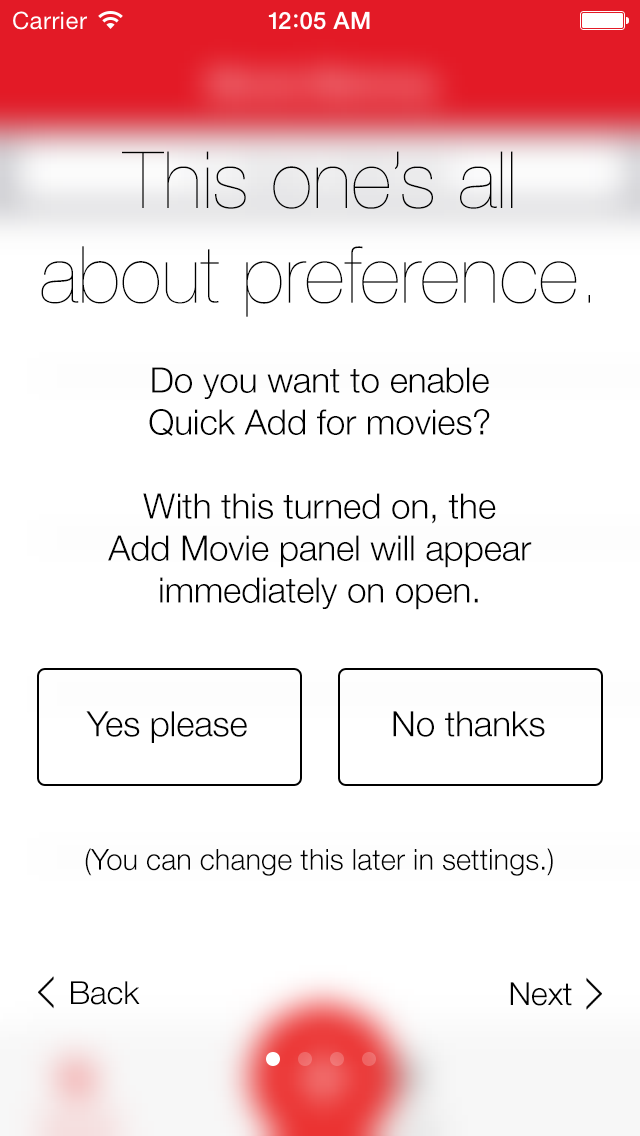
<style>
.page{position:relative;width:640px;height:1136px;background:#ffffff}
.page>*{position:absolute;margin:0}
.t1{font:79px "HelveticaNeue-UltraLight";color:#000000}
.t2{font:35px "HelveticaNeue-Light";color:#000000}
.t3{font:29px "HelveticaNeue-Light";color:#000000}
.t4{font:32px "HelveticaNeue-Light";color:#000000}
</style>
<div class="page">
<p class="t1" style="left:41px;top:151px;width:549px;height:166px;text-align:center">This one’s all<br>about preference.</p>
<p class="t2" style="left:108px;top:367px;width:424px;height:243px;text-align:center">Do you want to enable<br>Quick Add for movies?<br><br>With this turned on, the<br>Add Movie panel will appear<br>immediately on open.</p>
<p class="t2" style="left:86px;top:711px;width:161px;height:32px">Yes please</p>
<p class="t2" style="left:393px;top:711px;width:152px;height:26px">No thanks</p>
<p class="t3" style="left:85px;top:848px;width:468px;height:28px">(You can change this later in settings.)</p>
<p class="t4" style="left:71px;top:981px;width:69px;height:24px">Back</p>
<p class="t4" style="left:510px;top:982px;width:62px;height:24px">Next</p>
</div>
